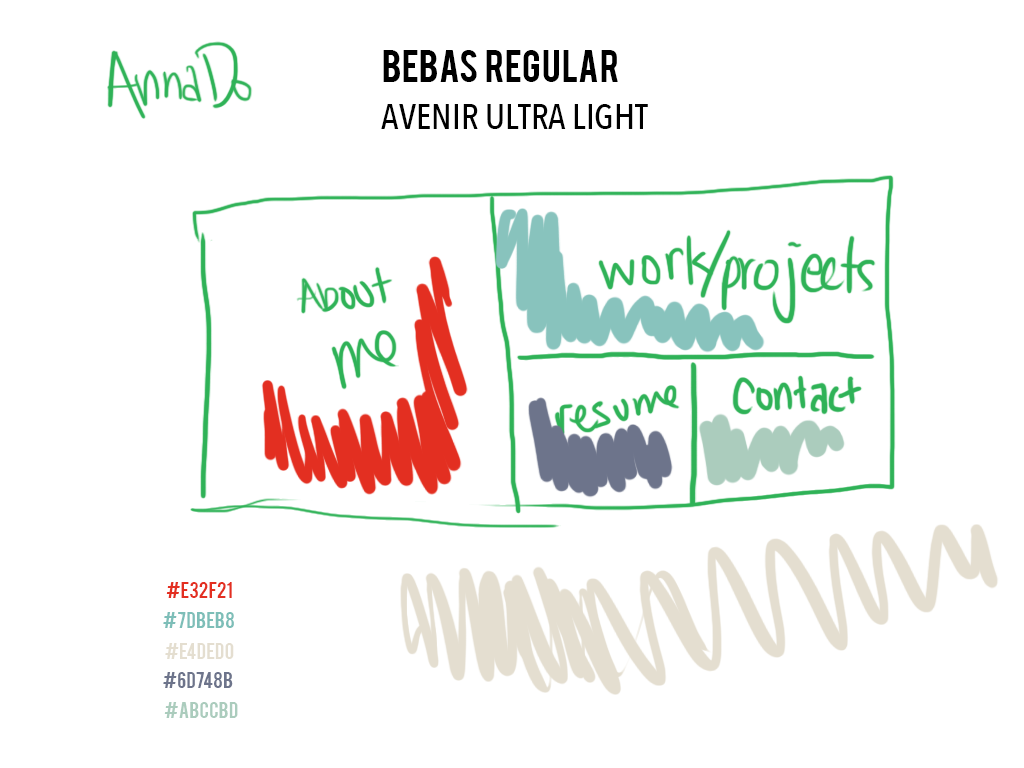
<style>
.page{position:relative;width:1024px;height:768px;background:#ffffff}
.page>*{position:absolute;margin:0}
.t1{font:36px "Bebas";color:#000000}
.t2{font:36px "AvenirNextCondensed-Medium";color:#000000}
.t3{font:18px "Bebas";color:#e32f21}
.t4{font:18px "Bebas";color:#7dbeb8}
.t5{font:18px "Bebas";color:#e4ded0}
.t6{font:18px "Bebas";color:#6d748b}
.t7{font:18px "Bebas";color:#abccbd}
</style>
<div class="page">
<p class="t1" style="left:383px;top:50px;width:235px;height:32px">BEBAS  REGULAR</p>
<p class="t2" style="left:381px;top:104px;width:267px;height:25px">AVENIR ULTRA LIGHT</p>
<p class="t3" style="left:166px;top:582px;width:66px;height:16px">#e32f21</p>
<p class="t4" style="left:163px;top:612px;width:71px;height:16px">#7dbeb8</p>
<p class="t5" style="left:165px;top:643px;width:69px;height:16px">#e4ded0</p>
<p class="t6" style="left:163px;top:672px;width:70px;height:16px">#6d748b</p>
<p class="t7" style="left:164px;top:702px;width:74px;height:16px">#abccbd</p>
</div>
